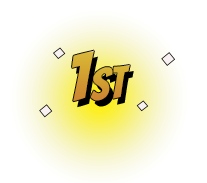
<style>
.page{position:relative;width:207px;height:183px;background:#ffffff}
.page>*{position:absolute;margin:0}
.t1{font:68.2px "Bangers-Regular";color:#d3a331}
.t2{font:44.4px "Bangers-Regular";color:#d2a031}
</style>
<div class="page">
<p class="t1" style="left:72px;top:50px;width:22px;height:52px;rotate:-5deg">1</p>
<p class="t2" style="left:90px;top:65px;width:40px;height:36px;rotate:-5deg">st</p>
</div>
